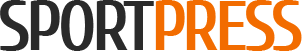
<style>
.page{position:relative;width:302px;height:51px;background:#ffffff}
.page>*{position:absolute;margin:0}
.t1{font:70px "Cuprum-Bold";letter-spacing:-0.06em;color:#2a2a2a;text-transform:uppercase}
.t2{font:70px "Cuprum-Bold";letter-spacing:-0.06em;color:#f26c00;text-transform:uppercase}
</style>
<div class="page">
<p class="t1" style="left:0px;top:0px;width:302px;height:51px">sPORT<span class="t2">Press</span></p>
</div>
